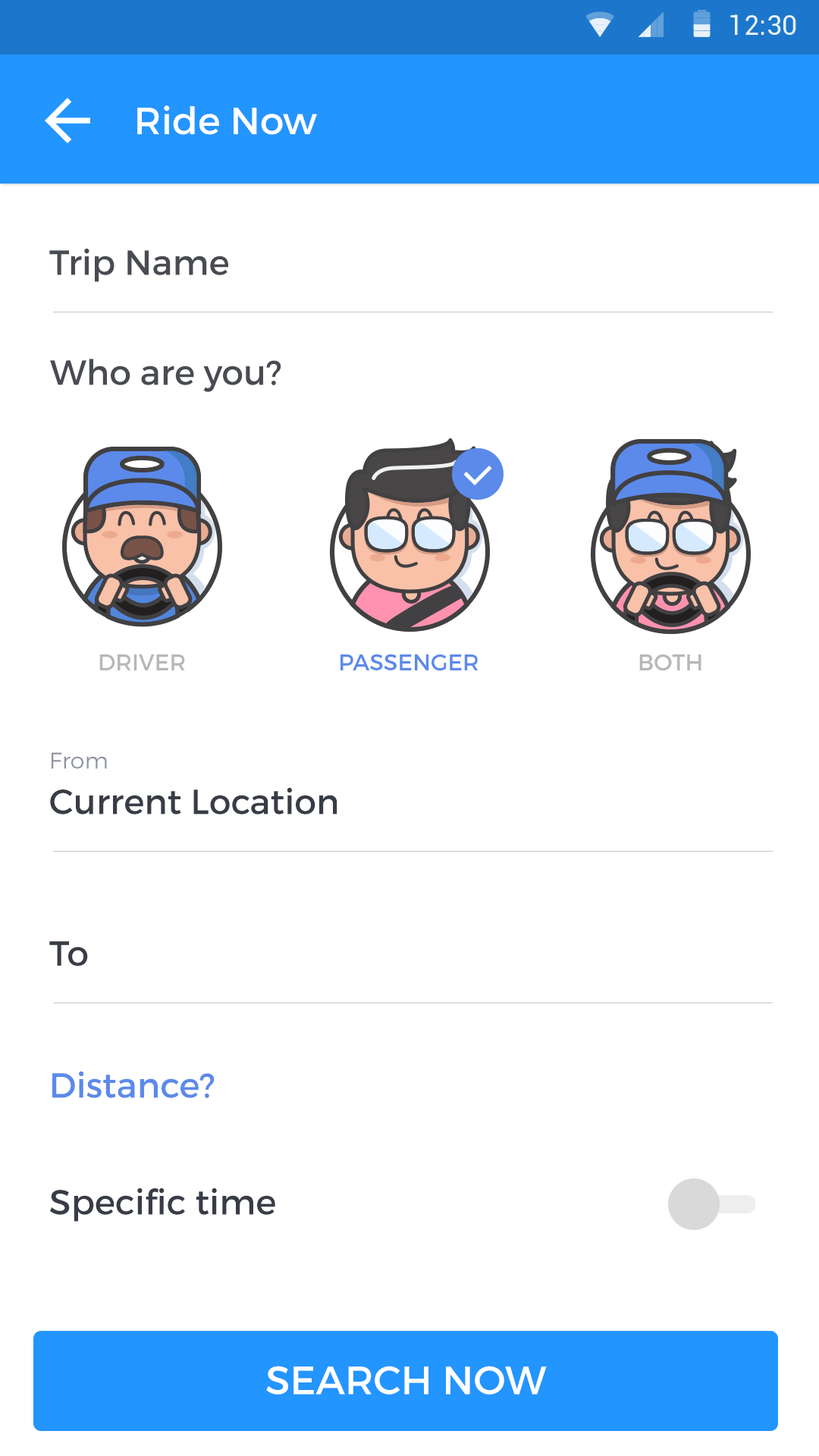
<style>
.page{position:relative;width:819px;height:1456px;background:#ffffff}
.page>*{position:absolute;margin:0}
.t1{font:37.9px "Montserrat-Regular";color:#ffffff}
.t2{font:34.9px "Montserrat-Regular";color:#484b51}
.t3{font:22.7px "Montserrat-Regular";color:#5c8aea;text-transform:uppercase}
.t4{font:22.7px "Montserrat-Regular";color:#b7b7b7;text-transform:uppercase}
.t5{font:22.7px "Montserrat-Light";color:#8c929f}
.t6{font:34.9px "Montserrat-Regular";color:#383c46}
.t7{font:34.9px "Montserrat-Regular";color:#5c8aea}
.t8{font:39.4px "Montserrat-Regular";color:#ffffff;text-transform:uppercase}
</style>
<div class="page">
<p class="t1" style="left:137px;top:105px;width:180px;height:30px">Ride Now</p>
<p class="t2" style="left:49px;top:248px;width:179px;height:34px">Trip Name</p>
<p class="t2" style="left:50px;top:359px;width:231px;height:33px">Who are you?</p>
<p class="t3" style="left:340px;top:654px;width:138px;height:17px">PASSENGER</p>
<p class="t4" style="left:99px;top:654px;width:86px;height:16px">DRIVER</p>
<p class="t4" style="left:639px;top:654px;width:62px;height:17px">BOTH</p>
<p class="t5" style="left:52px;top:752px;width:55px;height:17px">From</p>
<p class="t6" style="left:50px;top:787px;width:287px;height:27px">Current Location</p>
<p class="t6" style="left:49px;top:941px;width:39px;height:25px">To</p>
<p class="t7" style="left:52px;top:1071px;width:163px;height:27px">Distance?</p>
<p class="t6" style="left:50px;top:1188px;width:225px;height:34px">Specific time</p>
<p class="t8" style="left:266px;top:1366px;width:281px;height:29px">SEARCH NOW</p>
</div>
